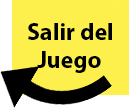
<style>
.page{position:relative;width:129px;height:108px;background:#fef04c}
.page>*{position:absolute;margin:0}
.t1{font:24px "MyriadPro-Bold";color:#000000}
</style>
<div class="page">
<p class="t1" style="left:28px;top:23px;width:84px;height:50px">Salir del<br>   Juego</p>
</div>
